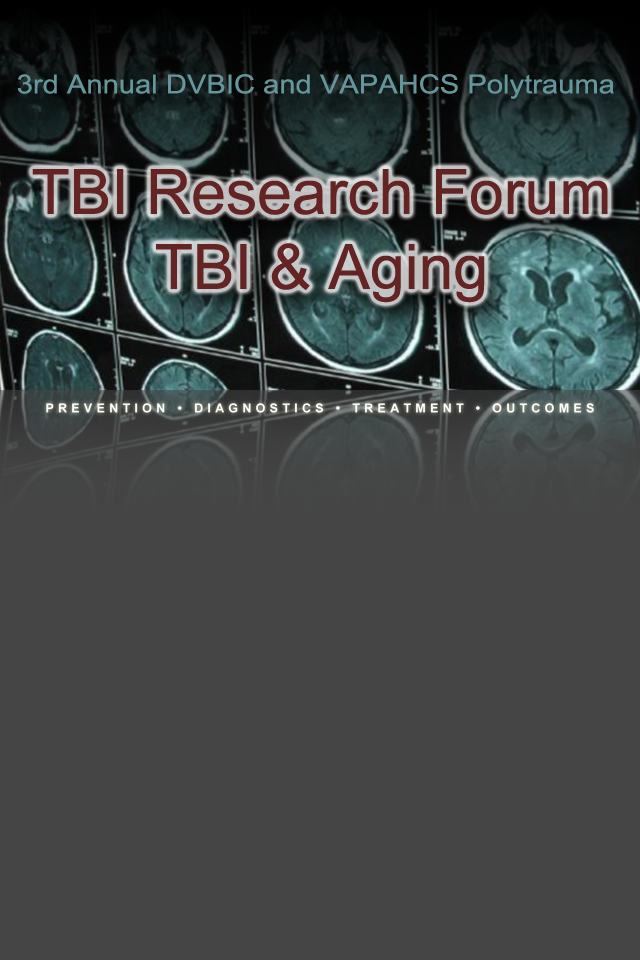
<style>
.page{position:relative;width:640px;height:960px;background:#454545}
.page>*{position:absolute;margin:0}
.t1{font:26.3px "ArialMT";color:#65969b;scale:1.11 1}
.t2{font:62.5px "ArialMT";color:#632423}
</style>
<div class="page">
<p class="t1" style="left:17px;top:74px;width:597px;height:25px">3rd Annual DVBIC and VAPAHCS Polytrauma</p>
<p class="t2" style="left:32px;top:169px;width:576px;height:134px;text-align:center">TBI Research Forum<br>TBI &amp; Aging</p>
</div>
